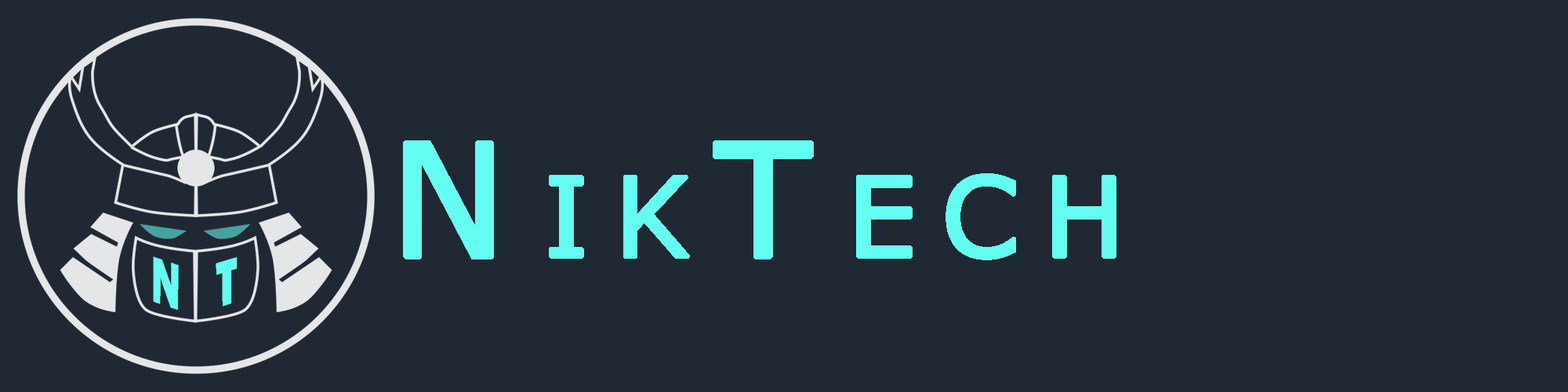
<style>
.page{position:relative;width:1568px;height:392px;background:#202833}
.page>*{position:absolute;margin:0}
.t1{font:156.8px "MSReferenceSansSerif";letter-spacing:0.2em;color:#64fdf1;font-variant:small-caps;font-weight:bold}
</style>
<div class="page">
<p class="t1" style="left:403px;top:140px;width:713px;height:120px">NikTech</p>
</div>
